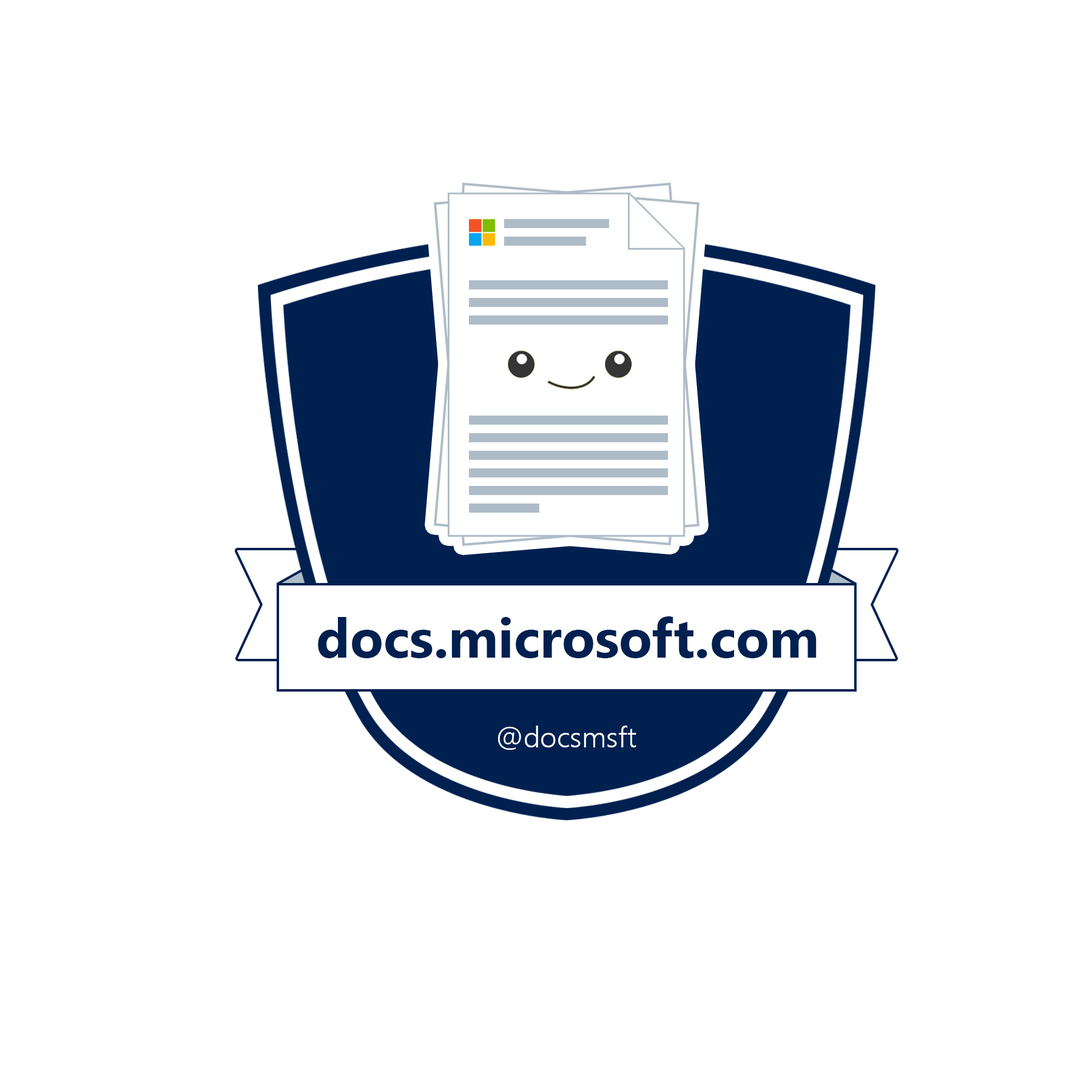
<style>
.page{position:relative;width:1092px;height:1092px;background:#ffffff}
.page>*{position:absolute;margin:0}
.t1{font:54.6px "SegoeUI-Bold";color:#002050}
.t2{font:29.1px "SegoeUI-Semilight";color:#ffffff}
</style>
<div class="page">
<p class="t1" style="left:318px;top:616px;width:499px;height:42px">docs.microsoft.com</p>
<p class="t2" style="left:498px;top:726px;width:138px;height:24px">@docsmsft</p>
</div>
